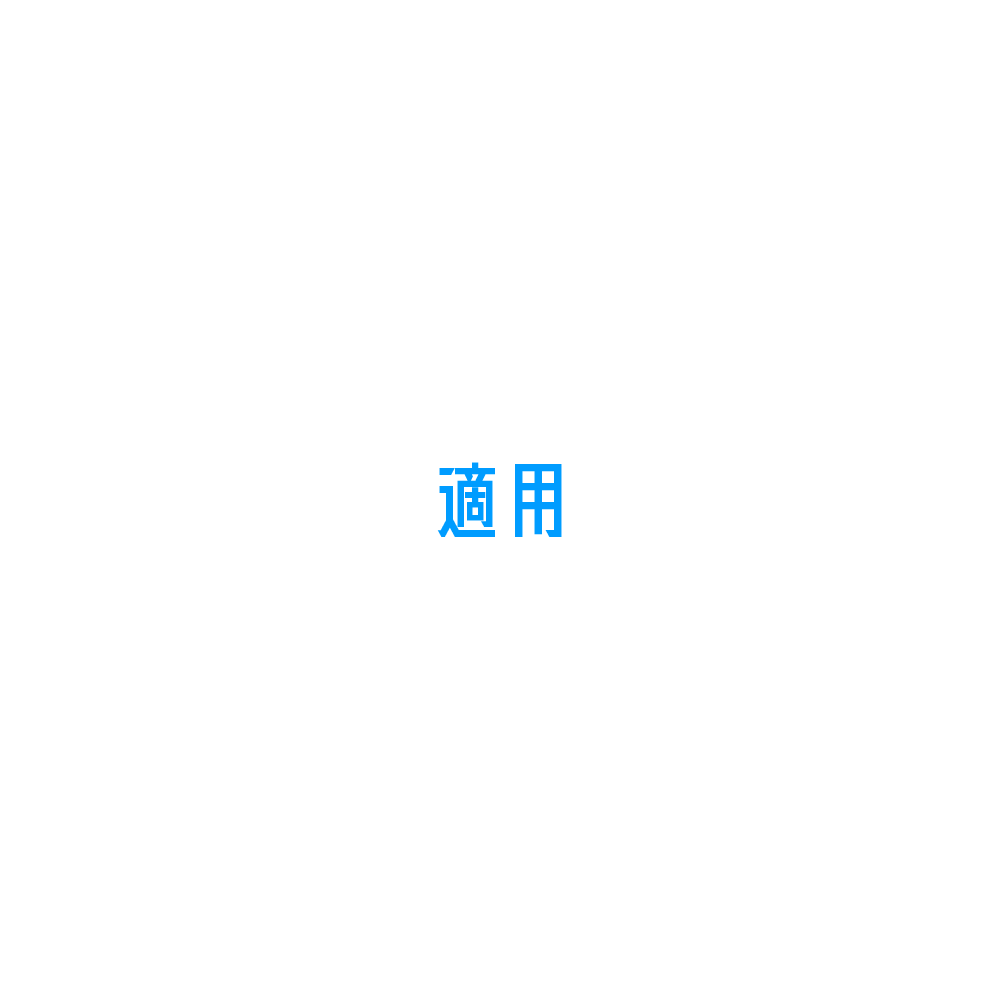
<style>
.page{position:relative;width:1000px;height:1000px;background:#ffffff}
.page>*{position:absolute;margin:0}
.t1{font:90.6px "Kaisotai-Next-UP-B";letter-spacing:-0.02em;color:#009cff}
</style>
<div class="page">
<p class="t1" style="left:437px;top:462px;width:125px;height:75px">適用</p>
</div>
